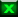
<style>
.page{position:relative;width:18px;height:17px}
.page>*{position:absolute;margin:0}
.t1{font:16.3px "Arial-BoldMT";color:#00ff1e;scale:1.22 1}
</style>
<div class="page">
<p class="t1" style="left:3px;top:4px;width:12px;height:9px">x</p>
</div>
